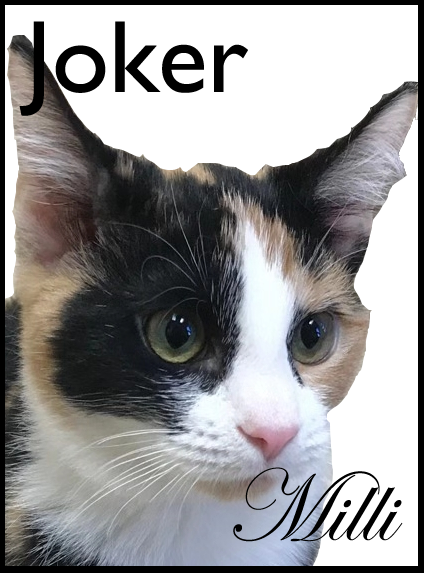
<style>
.page{position:relative;width:424px;height:573px;background:#ffffff}
.page>*{position:absolute;margin:0}
.t1{font:103.1px "GillSansMT";color:#000000}
.t2{font:103.1px "EdwardianScriptITC";color:#000000}
</style>
<div class="page">
<p class="t1" style="left:19px;top:21px;width:229px;height:95px">Joker</p>
<p class="t2" style="left:233px;top:467px;width:170px;height:75px">Milli</p>
</div>
